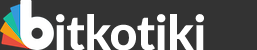
<style>
.page{position:relative;width:257px;height:50px;background:#333333}
.page>*{position:absolute;margin:0}
.t1{font:48px "Lato-Heavy";color:#ffffff}
</style>
<div class="page">
<p class="t1" style="left:56px;top:14px;width:148px;height:37px">itkotiki</p>
</div>
